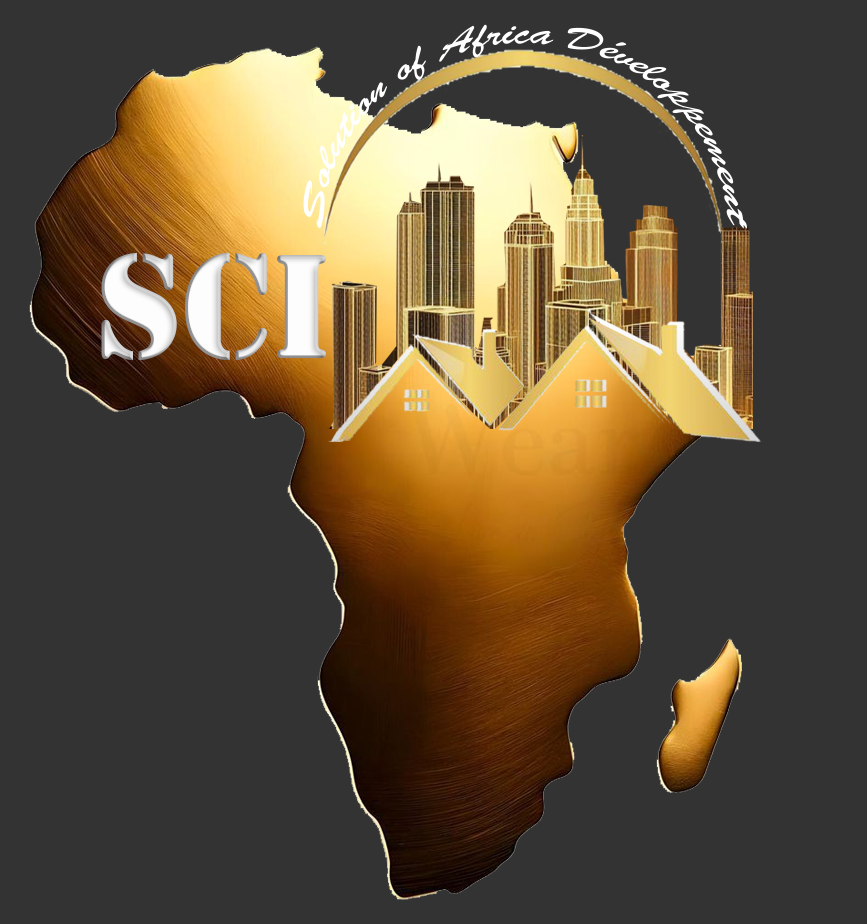
<style>
.page{position:relative;width:867px;height:924px;background:#333333}
.page>*{position:absolute;margin:0}
.t1{font:35px "BrushScriptMT";color:#ffffff}
.t2{font:153.5px "Stencil"}
</style>
<div class="page">
<p class="t1" style="left:303px;top:24px;width:444px;height:205px">Solution of Africa Développement</p>
<p class="t2" style="left:101px;top:252px;width:225px;height:109px">SCI</p>
</div>
